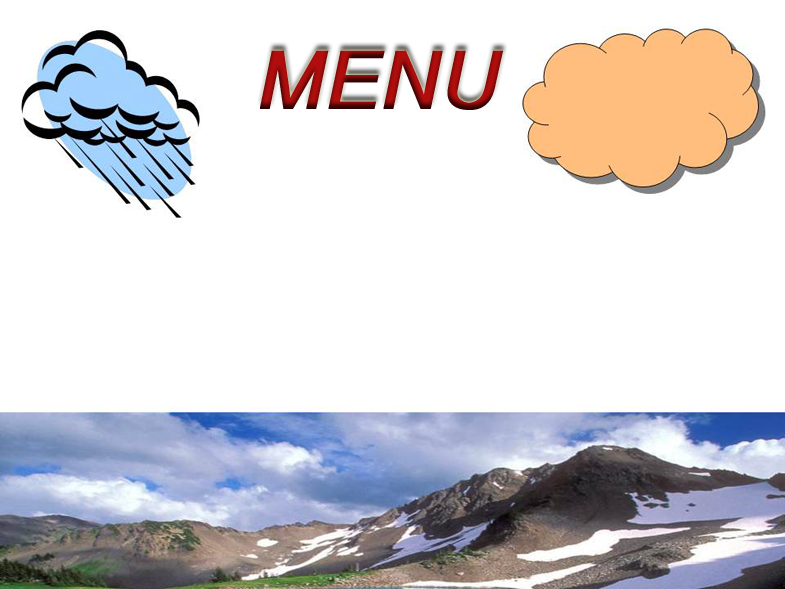
<style>
.page{position:relative;width:785px;height:589px;background:#ffffff}
.page>*{position:absolute;margin:0}
.t1{font:80px "Arial-ItalicMT";font-weight:bold}
</style>
<div class="page">
<p class="t1" style="left:260px;top:50px;width:243px;height:60px">MENU</p>
</div>
